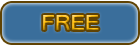
<style>
.page{position:relative;width:140px;height:46px;background:#3a6e9b}
.page>*{position:absolute;margin:0}
.t1{font:24px "Latha"}
</style>
<div class="page">
<p class="t1" style="left:43px;top:15px;width:56px;height:15px">FREE</p>
</div>
